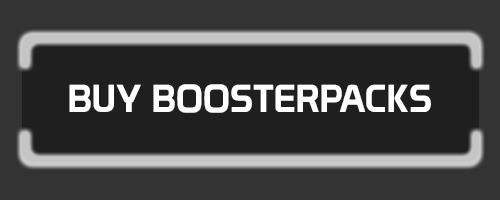
<style>
.page{position:relative;width:500px;height:200px;background:#1f1f1f}
.page>*{position:absolute;margin:0}
.t1{font:38px "Prototype";color:#ffffff}
</style>
<div class="page">
<p class="t1" style="left:69px;top:84px;width:362px;height:29px">BUY BOOSTERPACKS</p>
</div>
